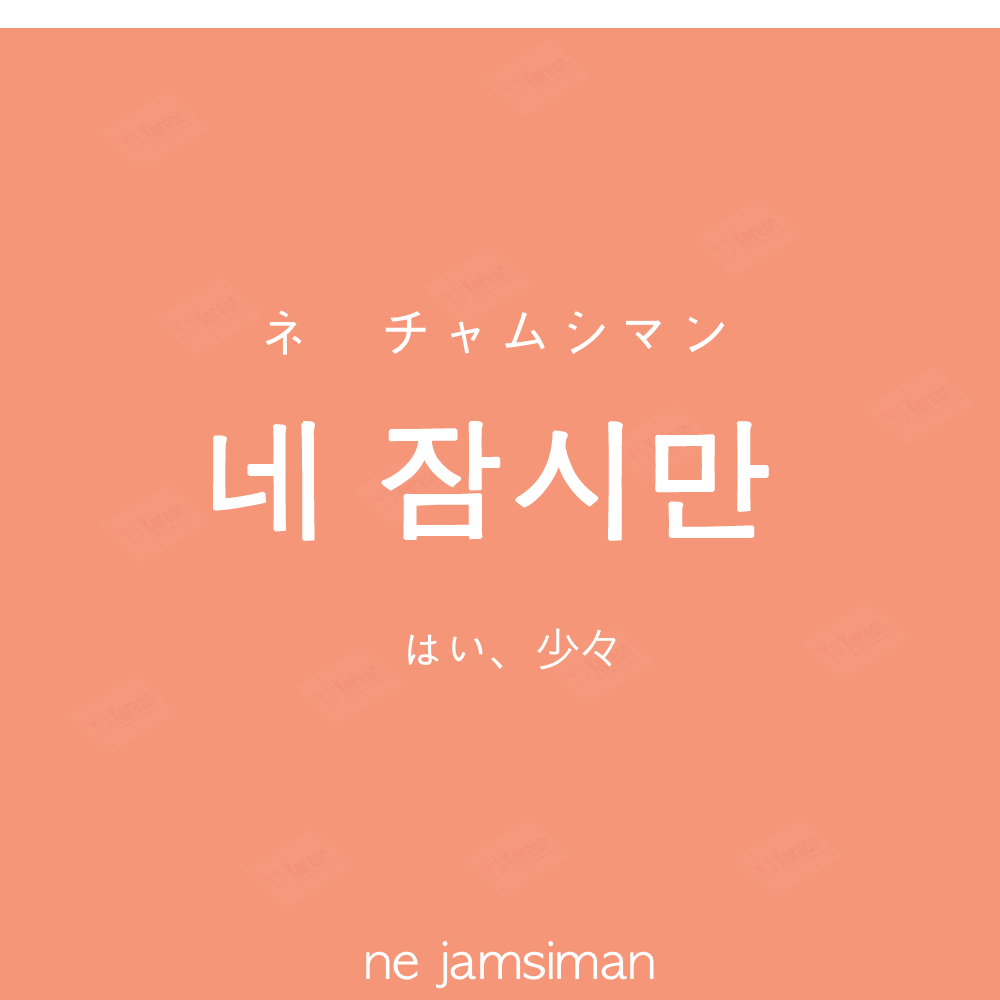
<style>
.page{position:relative;width:1000px;height:1000px;background:#f69679}
.page>*{position:absolute;margin:0}
.t1{font:60px "AppleGothic";color:#ffffff}
.t2{font:130px "AppleGothic";color:#ffffff;font-weight:bold}
.t3{font:45px "AppleGothic";color:#ffffff}
.t4{font:45px "HiraKakuProN-W3";color:#ffffff}
.t5{font:50px "AppleGothic";color:#ffffff}
</style>
<div class="page">
<p class="t1" style="left:265px;top:310px;width:460px;height:45px">ネ　チャムシマン</p>
<p class="t2" style="left:213px;top:421px;width:556px;height:120px">네 잠시만</p>
<p class="t3" style="left:408px;top:628px;width:208px;height:42px">はい、<span class="t4">少々</span></p>
<p class="t5" style="left:366px;top:941px;width:288px;height:48px">ne jamsiman</p>
</div>
